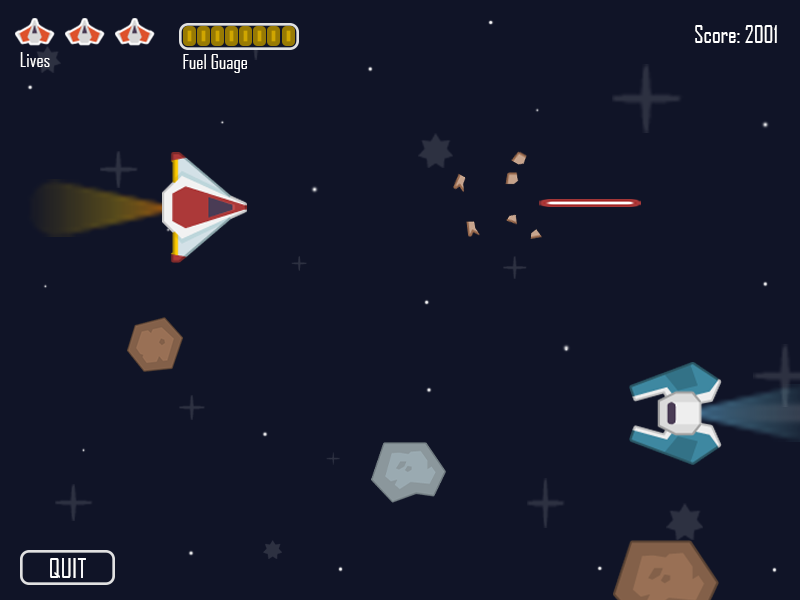
<style>
.page{position:relative;width:800px;height:600px;background:#101427}
.page>*{position:absolute;margin:0}
.t1{font:22.7px "AgencyFB-Reg";color:#ffffff}
.t2{font:19.2px "AgencyFB-Reg";color:#ffffff}
.t3{font:26.3px "AgencyFB-Reg";color:#ffffff}
</style>
<div class="page">
<p class="t1" style="left:695px;top:25px;width:82px;height:18px">Score: 2001</p>
<p class="t2" style="left:20px;top:52px;width:30px;height:15px">Lives</p>
<p class="t2" style="left:183px;top:54px;width:64px;height:19px">Fuel Guage</p>
<p class="t3" style="left:50px;top:558px;width:36px;height:20px">QUIT</p>
</div>
